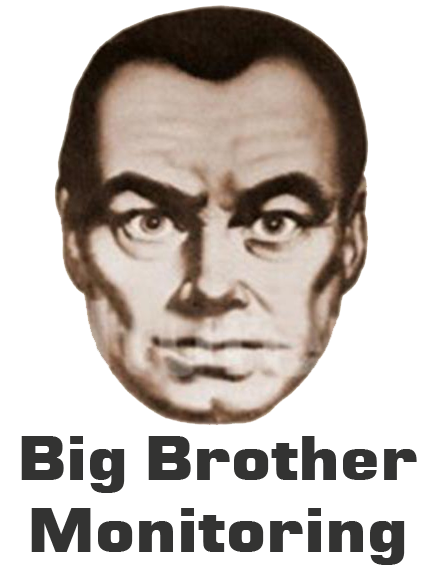
<style>
.page{position:relative;width:432px;height:575px;background:#ffffff}
.page>*{position:absolute;margin:0}
.t1{font:60px "Moire-ExtraBold";color:#333332}
</style>
<div class="page">
<p class="t1" style="left:21px;top:436px;width:396px;height:129px;text-align:center">Big Brother<br>Monitoring</p>
</div>
